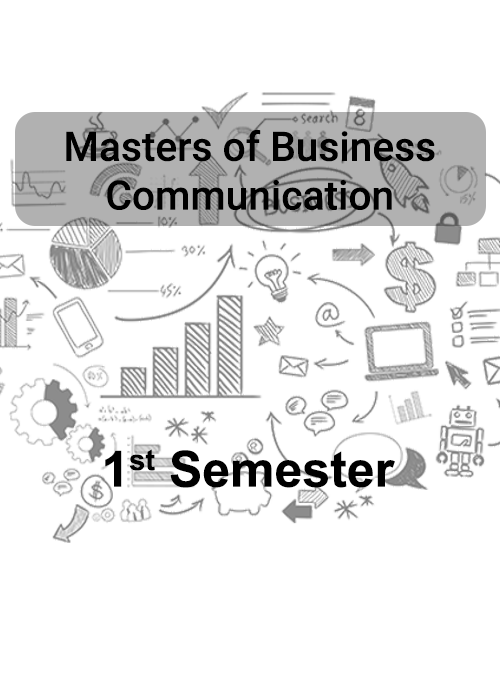
<style>
.page{position:relative;width:500px;height:700px;background:#ffffff}
.page>*{position:absolute;margin:0}
.t1{font:40.6px "Roboto-Medium";color:#000000}
.t2{font:50px "Arial-BoldMT";color:#000000}
</style>
<div class="page">
<p class="t1" style="left:66px;top:129px;width:369px;height:81px;text-align:center">Masters of Business<br>Communication</p>
<p class="t2" style="left:105px;top:449px;width:290px;height:39px">1st Semester</p>
</div>
